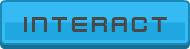
<style>
.page{position:relative;width:190px;height:49px;background:#35baf3}
.page>*{position:absolute;margin:0}
.t1{font:24px "KenVector-Future";color:#494949}
</style>
<div class="page">
<p class="t1" style="left:24px;top:17px;width:143px;height:15px">InTERACT</p>
</div>
